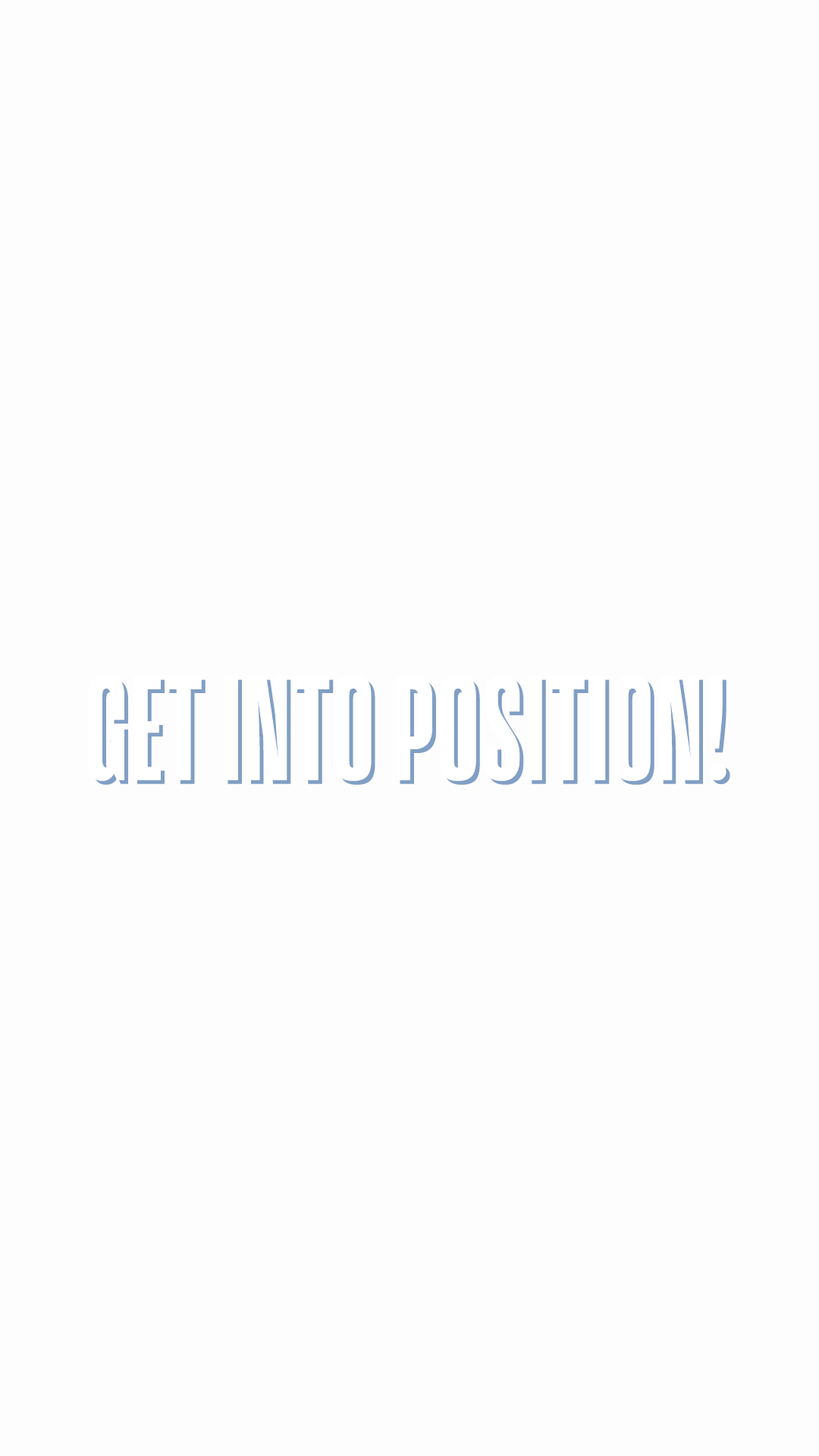
<style>
.page{position:relative;width:819px;height:1456px;background:#fefdfe}
.page>*{position:absolute;margin:0}
.t1{font:145.3px "ActionNBAApp-Bold";color:#ffffff}
</style>
<div class="page">
<p class="t1" style="left:88px;top:675px;width:638px;height:106px">GET INTO POSITION!</p>
</div>
